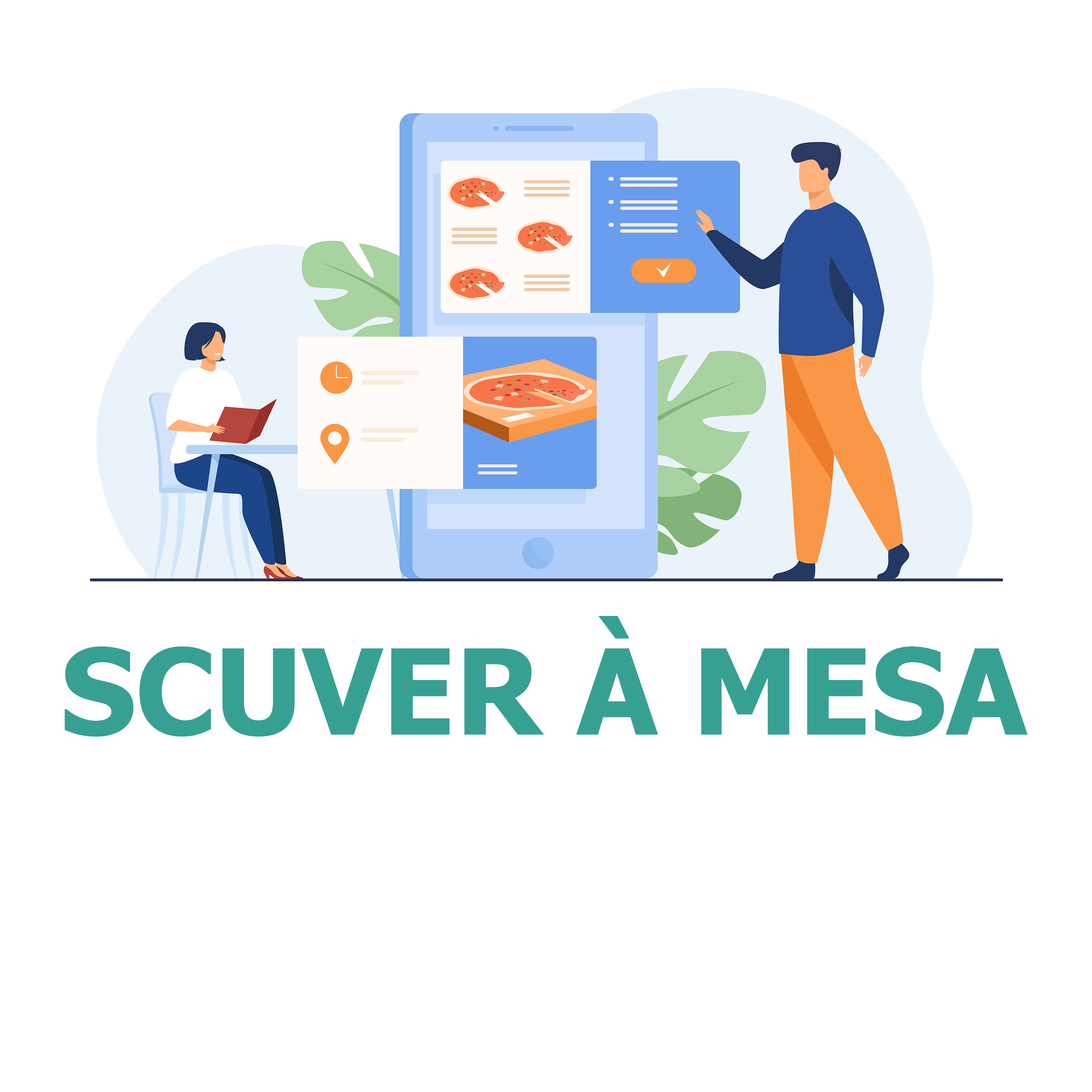
<style>
.page{position:relative;width:1092px;height:1092px;background:#ffffff}
.page>*{position:absolute;margin:0}
.t1{font:118.6px "Tahoma-Bold";color:#36a192}
</style>
<div class="page">
<p class="t1" style="left:64px;top:616px;width:964px;height:121px">SCUVER À MESA</p>
</div>
